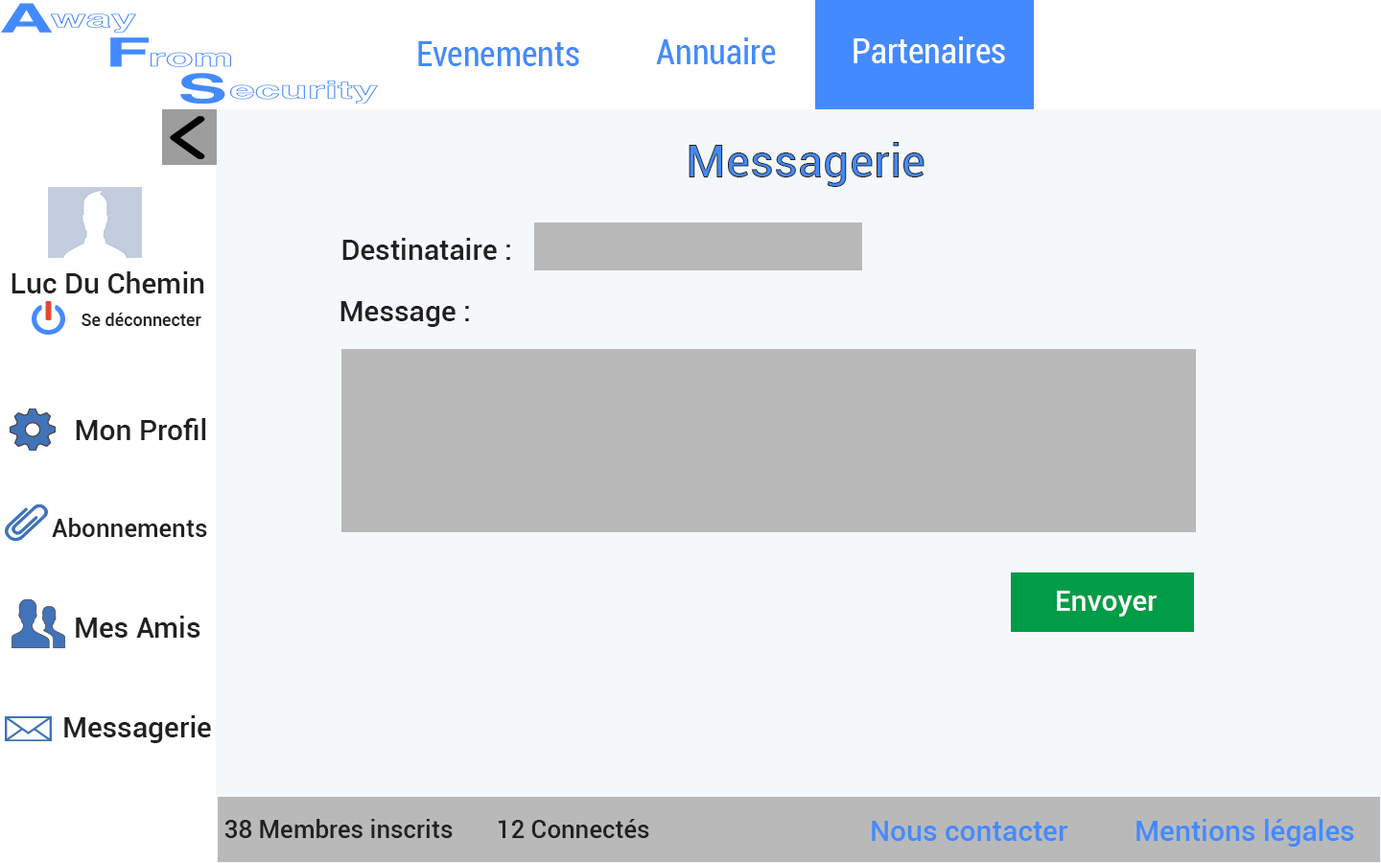
<style>
.page{position:relative;width:1381px;height:863px;background:#f5f8fa}
.page>*{position:absolute;margin:0}
.t1{font:34.5px "Roboto-Condensed";color:#448aff}
.t2{font:34.5px "Roboto-Condensed";color:#ffffff}
.t3{font:46px "Roboto-Medium"}
.t4{font:28.8px "Roboto-Medium";color:#212121}
.t5{font:17.3px "Roboto-Medium";color:#212121}
.t6{font:24.9px "Roboto-Medium";color:#212121}
.t7{font:28.8px "Roboto-Medium";color:#ffffff}
.t8{font:28.8px "Roboto-Medium";color:#448aff}
</style>
<div class="page">
<p class="t1" style="left:418px;top:41px;width:161px;height:25px">Evenements</p>
<p class="t1" style="left:656px;top:37px;width:120px;height:27px">Annuaire</p>
<p class="t2" style="left:854px;top:36px;width:151px;height:27px">Partenaires</p>
<p class="t3" style="left:689px;top:142px;width:236px;height:45px">Messagerie</p>
<p class="t4" style="left:342px;top:238px;width:168px;height:22px">Destinataire :</p>
<p class="t4" style="left:12px;top:271px;width:192px;height:23px">Luc Du Chemin</p>
<p class="t4" style="left:341px;top:301px;width:128px;height:26px">Message :</p>
<p class="t5" style="left:82px;top:313px;width:119px;height:13px">Se déconnecter</p>
<p class="t4" style="left:76px;top:418px;width:130px;height:22px">Mon Profil</p>
<p class="t6" style="left:52px;top:518px;width:155px;height:19px">Abonnements</p>
<p class="t7" style="left:1057px;top:591px;width:101px;height:26px">Envoyer</p>
<p class="t4" style="left:76px;top:616px;width:124px;height:22px">Mes Amis</p>
<p class="t4" style="left:64px;top:716px;width:147px;height:27px">Messagerie</p>
<p class="t6" style="left:224px;top:819px;width:425px;height:19px">38 Membres inscrits       12 Connectés</p>
<p class="t8" style="left:872px;top:821px;width:197px;height:20px">Nous contacter</p>
<p class="t8" style="left:1137px;top:819px;width:217px;height:28px">Mentions légales</p>
</div>
